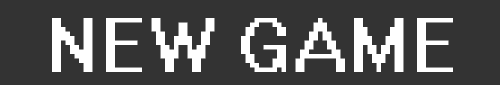
<style>
.page{position:relative;width:500px;height:85px;background:#333333}
.page>*{position:absolute;margin:0}
.t1{font:72px "System";color:#ffffff;text-transform:uppercase}
</style>
<div class="page">
<p class="t1" style="left:52px;top:18px;width:401px;height:54px">New Game</p>
</div>
